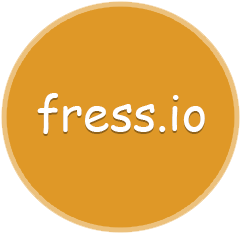
<style>
.page{position:relative;width:241px;height:234px;background:#df9827}
.page>*{position:absolute;margin:0}
.t1{font:48px "ComicSansMS";color:#ffffff}
</style>
<div class="page">
<p class="t1" style="left:37px;top:93px;width:168px;height:41px">fress.io</p>
</div>
